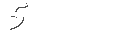
<style>
.page{position:relative;width:128px;height:32px;background:#ffffff}
.page>*{position:absolute;margin:0}
.t1{font:43px "DomDiagonalBT-Regular";letter-spacing:0.075em;color:#ffffff;scale:1.05 1}
</style>
<div class="page">
<p class="t1" style="left:8px;top:3px;width:20px;height:27px">5</p>
</div>
